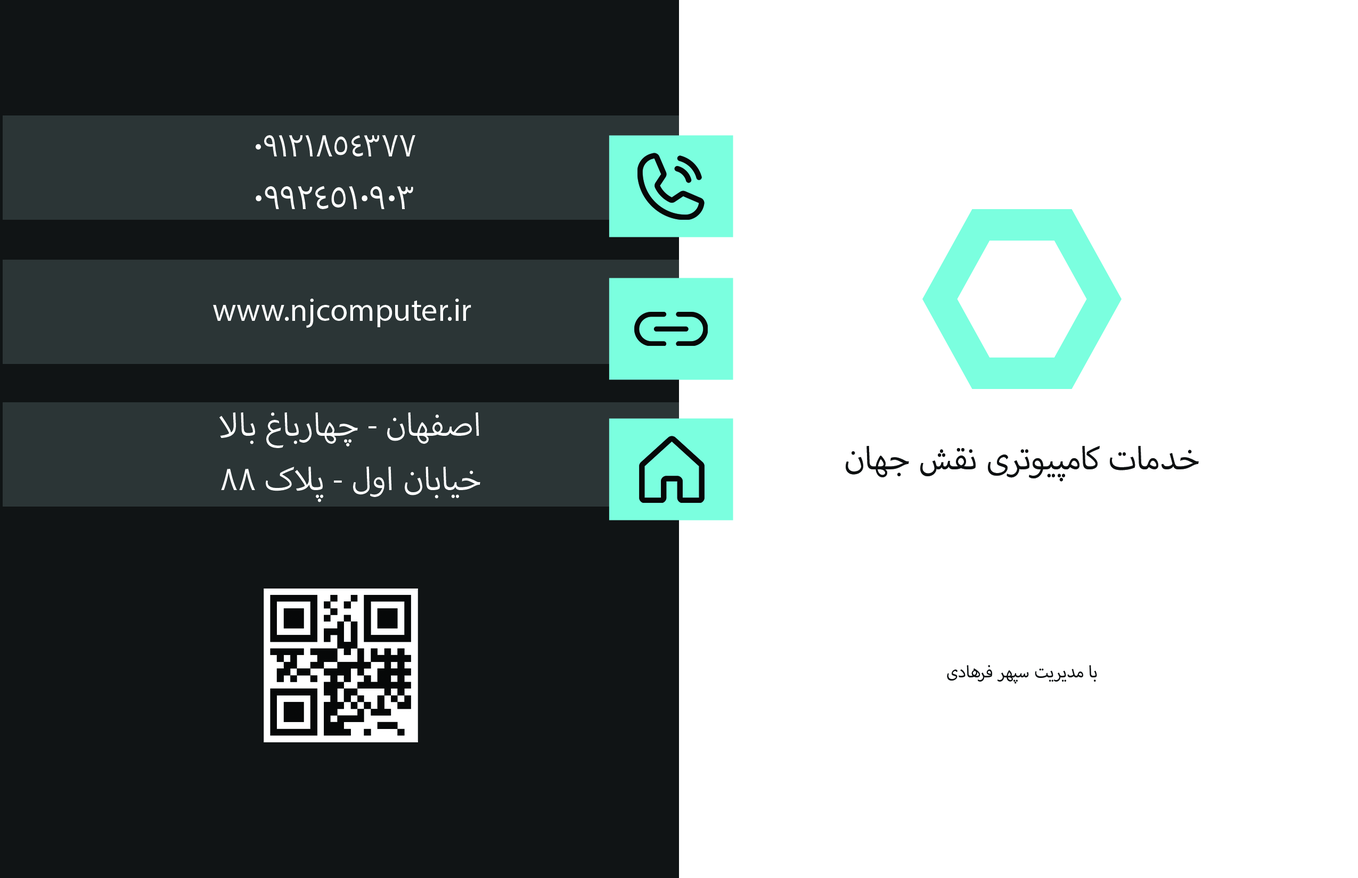
<style>
.page{position:relative;width:1358px;height:878px;background:#ffffff}
.page>*{position:absolute;margin:0}
.t1{font:44.6px "MyriadArabic-Regular";color:#ffffff}
.t2{font:48.6px "MyriadArabic-Regular";color:#ffffff}
.t3{font:45.3px "MyriadArabic-Regular";color:#ffffff}
.t4{font:45.3px "MyriadArabic-Regular";color:#0e1111}
.t5{font:23.3px "MyriadArabic-Regular";color:#0e1111}
</style>
<div class="page">
<p class="t1" style="left:256px;top:135px;width:159px;height:22px">09121854377</p>
<p class="t2" style="left:256px;top:186px;width:157px;height:23px">09924510903</p>
<p class="t3" style="left:213px;top:299px;width:258px;height:29px">www.njcomputer.ir</p>
<p class="t3" style="left:219px;top:413px;width:261px;height:90px">اصفهان - چهارباغ بالا<br>خیابان اول - پلاک 88</p>
<p class="t4" style="left:845px;top:446px;width:353px;height:36px">خدمات کامپیوتری نقش جهان</p>
<p class="t5" style="left:947px;top:665px;width:150px;height:19px">با مدیریت سپهر فرهادی</p>
</div>
